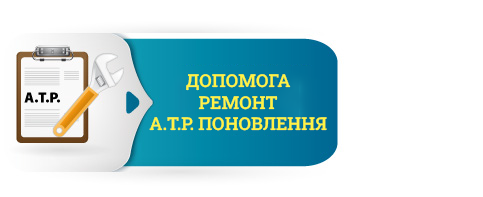
<style>
.page{position:relative;width:483px;height:197px;background:#ffffff}
.page>*{position:absolute;margin:0}
.t1{font:17.8px "RobotoSlab-SemiBold";color:#fff343}
</style>
<div class="page">
<p class="t1" style="left:149px;top:74px;width:178px;height:57px;text-align:center">ДОПОМОГА<br>РЕМОНТ<br>A.T.P. ПОНОВЛЕННЯ</p>
</div>
